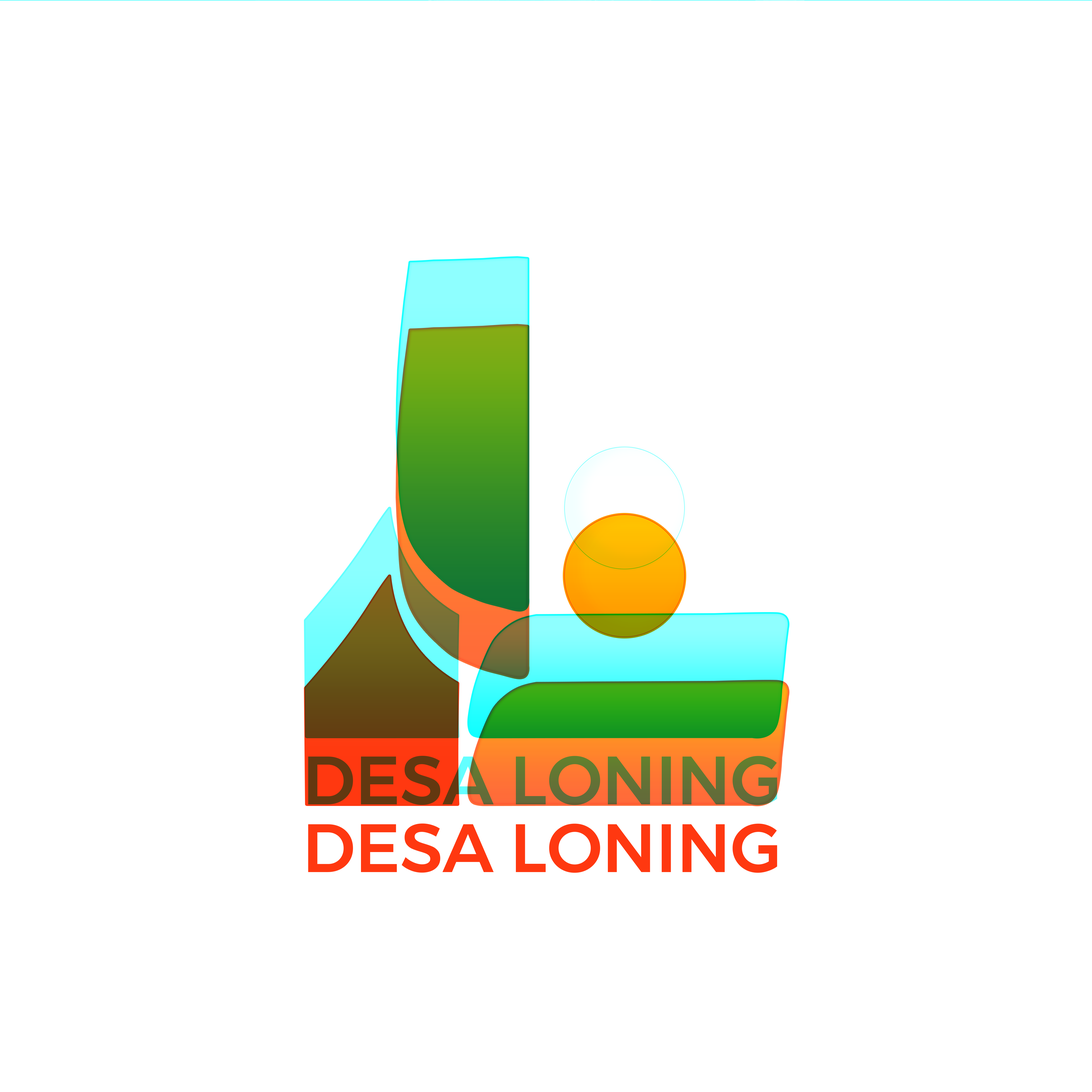
<style>
.page{position:relative;width:1092px;height:1092px;background:#ffffff}
.page>*{position:absolute;margin:0}
.t1{font:68.1px "Gontserrat-Medium"}
</style>
<div class="page">
<p class="t1" style="left:308px;top:755px;width:469px;height:50px">DESA LONING</p>
</div>
